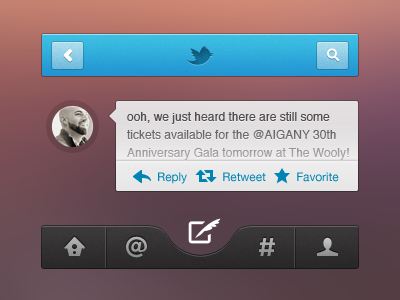
<style>
.page{position:relative;width:400px;height:300px}
.page>*{position:absolute;margin:0}
.t1{font:12px/18px "Helvetica"}
.t2{font:12px "HelveticaNeue";letter-spacing:-0.01em;color:#0084b4}
</style>
<div class="page">
<p class="t1" style="left:127px;top:112px;width:222px;height:66px">ooh, we just heard there are still some <br>tickets available for the @AIGANY 30th <br>Anniversary Gala tomorrow at The Wooly! <br>http://ow.ly/bgUvD</p>
<p class="t2" style="left:158px;top:172px;width:181px;height:12px">Reply           Retweet          Favorite</p>
</div>
